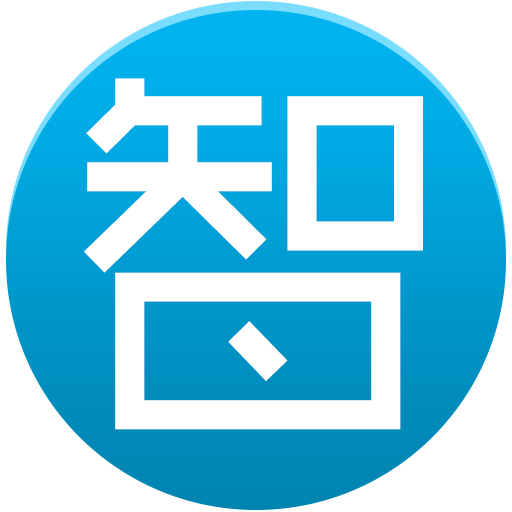
<style>
.page{position:relative;width:512px;height:512px;background:#ffffff}
.page>*{position:absolute;margin:0}
.t1{font:398.8px "MFShangHei_Noncommercial-Regular";color:#ffffff}
</style>
<div class="page">
<p class="t1" style="left:84px;top:78px;width:339px;height:352px">智</p>
</div>
